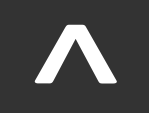
<style>
.page{position:relative;width:149px;height:113px;background:#333333}
.page>*{position:absolute;margin:0}
.t1{font:193.7px "Geogrotesque-Medium";color:#ffffff;scale:0.78 1}
</style>
<div class="page">
<p class="t1" style="left:34px;top:24px;width:83px;height:60px;rotate:90deg">&lt;</p>
</div>
